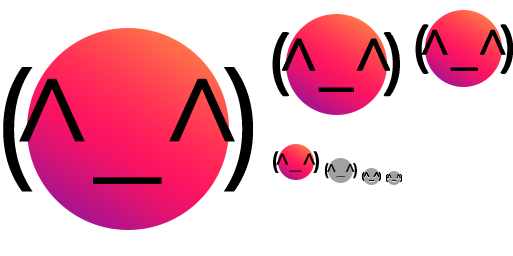
<style>
.page{position:relative;width:513px;height:256px;background:#ffffff}
.page>*{position:absolute;margin:0}
.t1{font:58.6px "MyriadPro-Regular";color:#000000;scale:0.95 1}
.t2{font:51.9px "MyriadPro-Regular";color:#000000}
.t3{font:76.5px "MyriadPro-Regular";color:#000000;scale:0.95 1}
.t4{font:67.7px "MyriadPro-Regular";color:#000000}
.t5{font:152.7px "MyriadPro-Regular";color:#000000;scale:0.95 1}
.t6{font:135.3px "MyriadPro-Regular";color:#000000}
.t7{font:27px "MyriadPro-Bold";color:#000000;scale:0.95 1}
.t8{font:24px "MyriadPro-Bold";color:#000000}
.t9{font:19px "MyriadPro-Bold";color:#000000;scale:0.95 1}
.t10{font:16.9px "MyriadPro-Bold";color:#000000}
.t11{font:10.8px "MyriadPro-Bold";color:#000000;scale:0.95 1}
.t12{font:9.6px "MyriadPro-Bold";color:#000000}
.t13{font:9px "MyriadPro-Bold";color:#000000;scale:0.95 1}
.t14{font:8.4px "MyriadPro-Bold"}
</style>
<div class="page">
<p class="t1" style="left:416px;top:25px;width:97px;height:48px">(      )</p>
<p class="t2" style="left:422px;top:30px;width:84px;height:41px">^_^</p>
<p class="t3" style="left:273px;top:33px;width:126px;height:63px">(      )</p>
<p class="t4" style="left:282px;top:39px;width:108px;height:53px">^_^</p>
<p class="t5" style="left:3px;top:67px;width:250px;height:125px">(      )</p>
<p class="t6" style="left:19px;top:78px;width:216px;height:106px">^_^</p>
<p class="t7" style="left:273px;top:151px;width:46px;height:22px">(      )</p>
<p class="t8" style="left:276px;top:153px;width:40px;height:19px">^_^</p>
<p class="t9" style="left:324px;top:163px;width:33px;height:16px">(      )</p>
<p class="t10" style="left:327px;top:164px;width:28px;height:13px">^_^</p>
<p class="t11" style="left:362px;top:172px;width:19px;height:9px">(      )</p>
<p class="t12" style="left:363px;top:172px;width:17px;height:9px">^_^</p>
<p class="t13" style="left:385px;top:174px;width:18px;height:8px">(      )</p>
<p class="t14" style="left:387px;top:174px;width:14px;height:7px">^_^</p>
</div>
